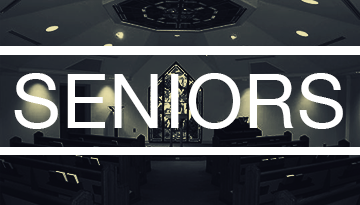
<style>
.page{position:relative;width:360px;height:205px}
.page>*{position:absolute;margin:0}
.t1{font:75px "HelveticaNeue";letter-spacing:0.02em;color:#ffffff}
</style>
<div class="page">
<p class="t1" style="left:14px;top:73px;width:329px;height:56px">SENIORS</p>
</div>
